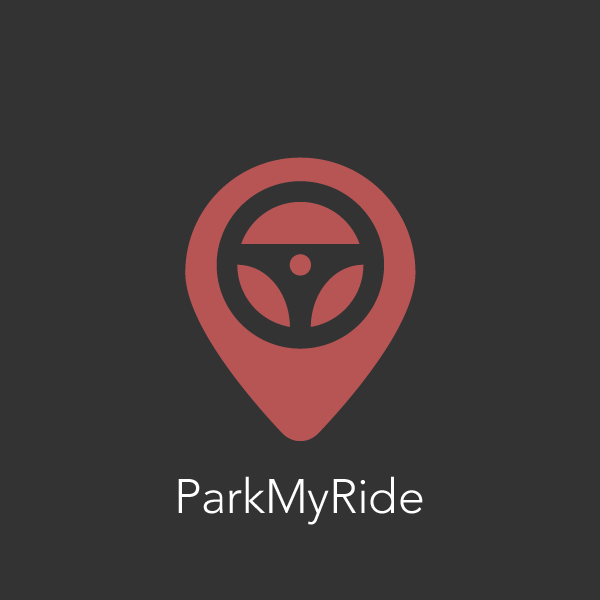
<style>
.page{position:relative;width:600px;height:600px;background:#333333}
.page>*{position:absolute;margin:0}
.t1{font:48px "Avenir-Light";letter-spacing:-0.005em;color:#ffffff}
</style>
<div class="page">
<p class="t1" style="left:178px;top:476px;width:245px;height:49px">ParkMyRide</p>
</div>
